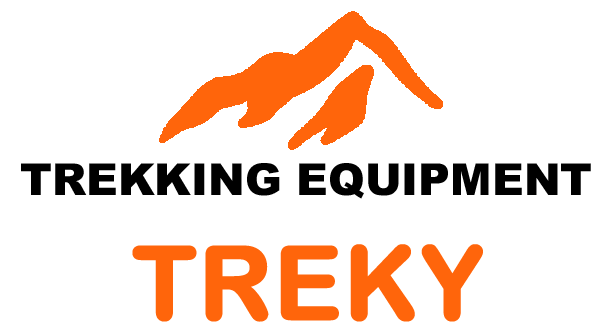
<style>
.page{position:relative;width:610px;height:336px;background:#ffffff}
.page>*{position:absolute;margin:0}
.t1{font:44px "ArialMT-Black";color:#000000}
.t2{font:101px "ArialRoundedMTBold";color:#ff650b;font-weight:bold}
</style>
<div class="page">
<p class="t1" style="left:21px;top:163px;width:570px;height:36px">TREKKING EQUIPMENT</p>
<p class="t2" style="left:132px;top:244px;width:351px;height:78px">TREKY</p>
</div>
